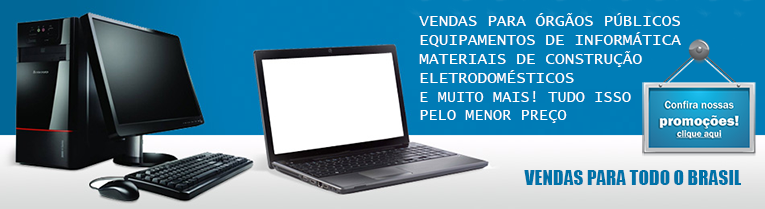
<style>
.page{position:relative;width:765px;height:209px}
.page>*{position:absolute;margin:0}
.t1{font:16.1px "LucidaConsole";color:#ffffff}
.t2{font:15.3px "LucidaConsole";color:#ffffff}
.t3{font:19.3px "Impact";color:#0072a8}
</style>
<div class="page">
<p class="t1" style="left:419px;top:13px;width:262px;height:110px">VENDAS PARA ÓRGÃOS PÚBLICOS<br>EQUIPAMENTOS DE INFORMÁTICA<br>MATERIAIS DE CONSTRUÇÃO<br>ELETRODOMÉSTICOS<br><span class="t2">E MUITO MAIS! TUDO ISSO<br>PELO MENOR PREÇO</span></p>
<p class="t3" style="left:524px;top:170px;width:217px;height:15px">VENDAS PARA TODO O BRASIL</p>
</div>
